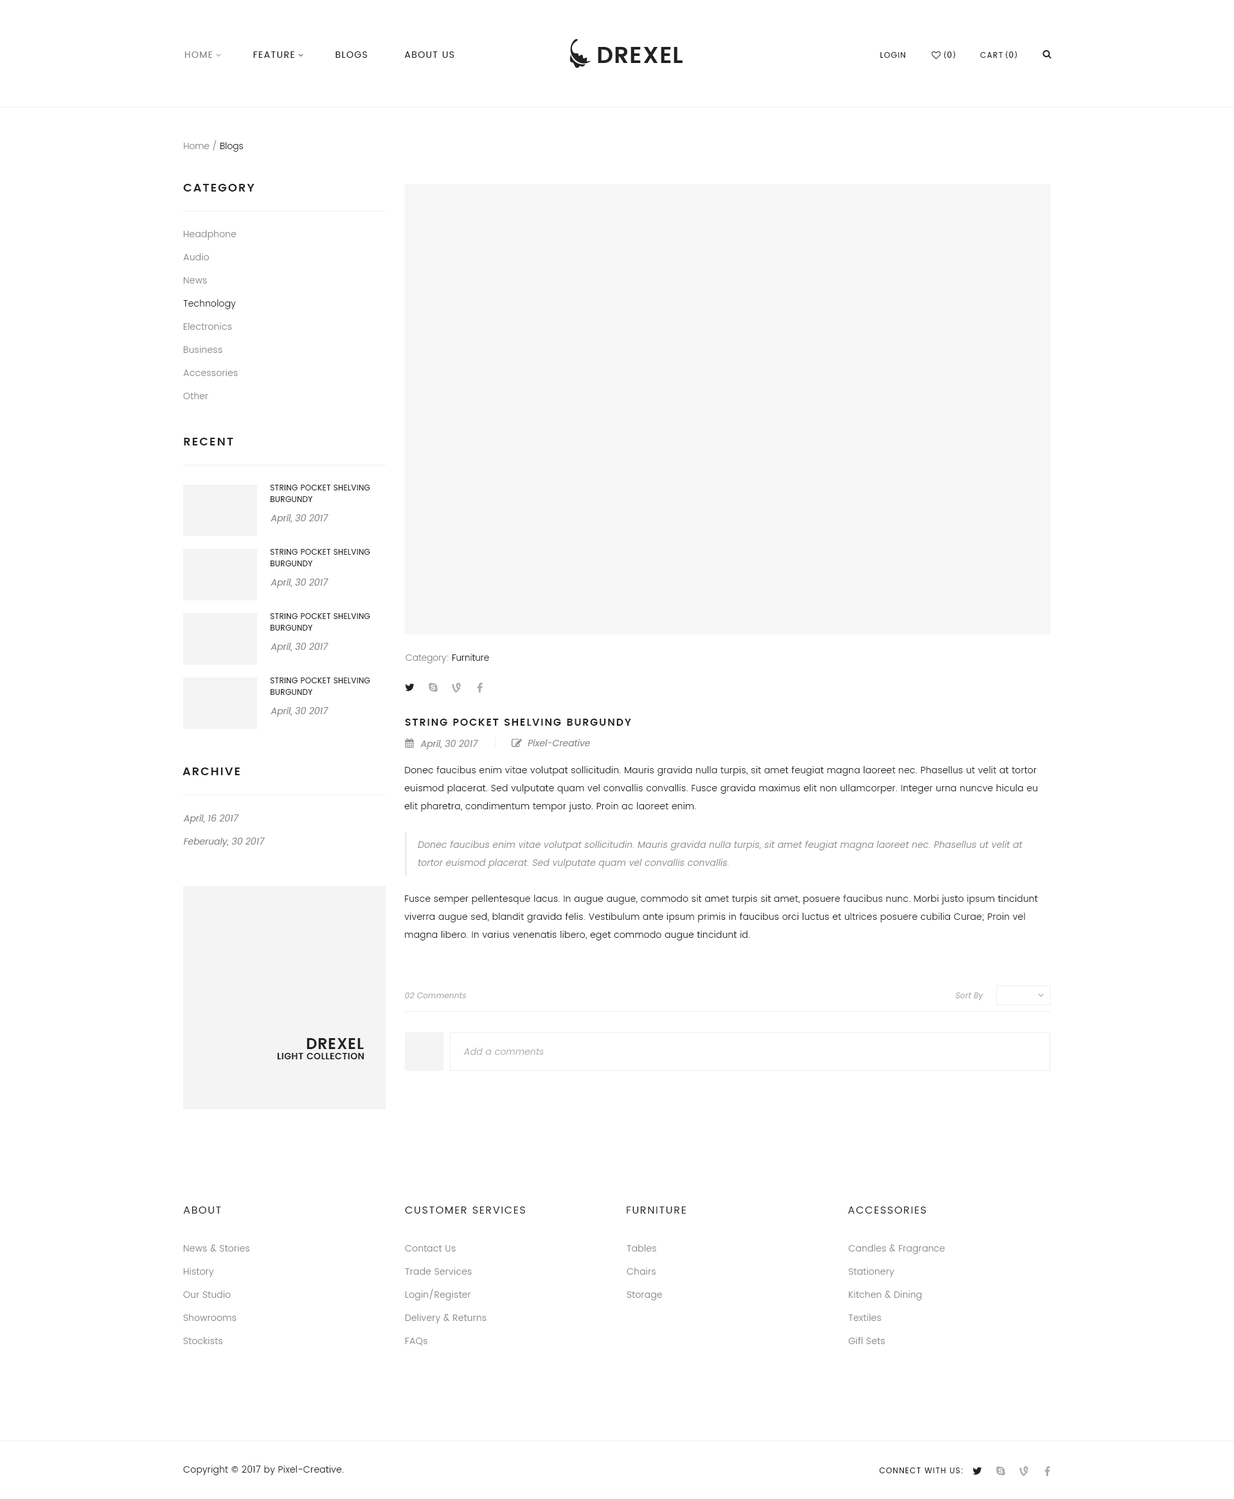
<style>
.page{position:relative;width:1234px;height:1499px;background:#ffffff}
.page>*{position:absolute;margin:0}
.t1{font:9px "Poppins-Regular";letter-spacing:0.1em;color:#222222;text-transform:uppercase}
.t2{font:9px "Poppins-Regular";letter-spacing:0.1em;color:#888888;text-transform:uppercase}
.t3{font:7.7px "Poppins-Regular";letter-spacing:0.1em;color:#222222;text-transform:uppercase}
.t4{font:9px "MyriadPro-Regular";letter-spacing:0.1em;color:#222222;text-transform:uppercase}
.t5{font:9px "Poppins-Light";color:#888888}
.t6{font:9px "Poppins-Light";color:#222222}
.t7{font:11.6px "Poppins-SemiBold";letter-spacing:0.1em;color:#222222;text-transform:uppercase}
.t8{font:9px/23.1px "Poppins-Light";letter-spacing:0.025em;color:#888888}
.t9{font:9px/23.1px "Poppins-Light";letter-spacing:0.025em;color:#222222}
.t10{font:7.7px/11.6px "Poppins-Regular";letter-spacing:0.025em;color:#222222;text-transform:uppercase}
.t11{font:9px "Poppins-Regular";color:#888888;font-style:italic}
.t12{font:10.3px "Poppins-SemiBold";letter-spacing:0.1em;color:#222222;text-transform:uppercase}
.t13{font:9px/18px "Poppins-Light";letter-spacing:0.025em;color:#222222}
.t14{font:9px/23.1px "Poppins-Regular";color:#888888;font-style:italic}
.t15{font:9px/18px "Poppins-Light";letter-spacing:0.025em;color:#888888;font-style:italic}
.t16{font:7.7px "Poppins-Regular";letter-spacing:0.025em;color:#aaaaaa;font-style:italic}
.t17{font:15.4px "Poppins-SemiBold";letter-spacing:0.025em;color:#222222;text-transform:uppercase}
.t18{font:9px "Poppins-Light";letter-spacing:0.025em;color:#aaaaaa;font-style:italic}
.t19{font:9px "Poppins-SemiBold";letter-spacing:0.025em;color:#222222;text-transform:uppercase}
.t20{font:10.3px "Poppins-Regular";letter-spacing:0.1em;color:#222222;text-transform:uppercase}
.t21{font:9px "Poppins-Light";letter-spacing:0.025em;color:#222222}
</style>
<div class="page">
<p class="t1" style="left:184px;top:51px;width:271px;height:7px"><span class="t2">Home</span>           Feature           Blogs          About Us</p>
<p class="t3" style="left:881px;top:52px;width:25px;height:6px">Login</p>
<p class="t4" style="left:944px;top:51px;width:11px;height:8px">(0)</p>
<p class="t3" style="left:980px;top:52px;width:23px;height:6px">Cart</p>
<p class="t4" style="left:1006px;top:51px;width:11px;height:8px">(0)</p>
<p class="t5" style="left:184px;top:140px;width:59px;height:12px">Home / <span class="t6">Blogs</span></p>
<p class="t7" style="left:183px;top:184px;width:72px;height:8px">CAtegory</p>
<p class="t8" style="left:183px;top:230px;width:55px;height:169px">Headphone<br>Audio<br>News<br><span class="t9">Technology<br></span>Electronics<br>Business<br>Accessories<br>Other</p>
<p class="t7" style="left:184px;top:438px;width:49px;height:8px">Recent</p>
<p class="t10" style="left:270px;top:485px;width:100px;height:17px">String Pocket Shelving Burgundy</p>
<p class="t11" style="left:271px;top:514px;width:57px;height:10px">April, 30 2017</p>
<p class="t10" style="left:270px;top:549px;width:100px;height:17px">String Pocket Shelving Burgundy</p>
<p class="t11" style="left:271px;top:579px;width:57px;height:9px">April, 30 2017</p>
<p class="t10" style="left:270px;top:613px;width:100px;height:18px">String Pocket Shelving Burgundy</p>
<p class="t11" style="left:271px;top:643px;width:57px;height:9px">April, 30 2017</p>
<p class="t5" style="left:406px;top:654px;width:83px;height:9px">Category: <span class="t6">Furniture</span></p>
<p class="t10" style="left:270px;top:678px;width:100px;height:17px">String Pocket Shelving Burgundy</p>
<p class="t11" style="left:271px;top:707px;width:57px;height:10px">April, 30 2017</p>
<p class="t12" style="left:405px;top:719px;width:226px;height:7px">String Pocket Shelving Burgundy</p>
<p class="t11" style="left:420px;top:740px;width:58px;height:10px">April, 30 2017</p>
<p class="t11" style="left:528px;top:739px;width:62px;height:7px">Pixel-Creative</p>
<p class="t7" style="left:183px;top:768px;width:57px;height:7px">ARCHIVE</p>
<p class="t13" style="left:404px;top:766px;width:634px;height:46px">Donec faucibus enim vitae volutpat sollicitudin. Mauris gravida nulla turpis, sit amet feugiat magna laoreet nec. Phasellus ut velit at tortor euismod placerat. Sed vulputate quam vel convallis convallis. Fusce gravida maximus elit non ullamcorper. Integer urna nuncve hicula eu elit pharetra, condimentum tempor justo. Proin ac laoreet enim.</p>
<p class="t14" style="left:183px;top:815px;width:82px;height:32px">April, 16 2017<br>Feberualy, 30 2017</p>
<p class="t15" style="left:418px;top:841px;width:605px;height:28px">Donec faucibus enim vitae volutpat sollicitudin. Mauris gravida nulla turpis, sit amet feugiat magna laoreet nec. Phasellus ut velit at tortor euismod placerat. Sed vulputate quam vel convallis convallis.</p>
<p class="t13" style="left:404px;top:895px;width:634px;height:46px">Fusce semper pellentesque lacus. In augue augue, commodo sit amet turpis sit amet, posuere faucibus nunc. Morbi justo ipsum tincidunt viverra augue sed, blandit gravida felis. Vestibulum ante ipsum primis in faucibus orci luctus et ultrices posuere cubilia Curae; Proin vel magna libero. In varius venenatis libero, eget commodo augue tincidunt id.</p>
<p class="t16" style="left:405px;top:993px;width:61px;height:5px">02 Commennts</p>
<p class="t16" style="left:956px;top:993px;width:28px;height:7px">Sort By</p>
<p class="t17" style="left:307px;top:1038px;width:57px;height:11px">Drexel</p>
<p class="t18" style="left:464px;top:1048px;width:80px;height:7px">Add a comments</p>
<p class="t19" style="left:277px;top:1053px;width:87px;height:6px">light collection</p>
<p class="t20" style="left:183px;top:1207px;width:38px;height:7px">About</p>
<p class="t20" style="left:405px;top:1207px;width:120px;height:7px">Customer services</p>
<p class="t20" style="left:627px;top:1207px;width:59px;height:7px">Furniture</p>
<p class="t20" style="left:848px;top:1207px;width:78px;height:7px">Accessories</p>
<p class="t8" style="left:183px;top:1245px;width:66px;height:99px">News &amp; Stories<br>History<br>Our Studio<br>Showrooms<br>Stockists</p>
<p class="t8" style="left:405px;top:1245px;width:82px;height:101px">Contact Us<br>Trade Services<br>Login/Register<br>Delivery &amp; Returns<br>FAQs</p>
<p class="t8" style="left:627px;top:1245px;width:35px;height:55px">Tables<br>Chairs<br>Storage</p>
<p class="t8" style="left:849px;top:1245px;width:96px;height:99px">Candles &amp; Fragrance<br>Stationery<br>Kitchen &amp; Dining<br>Textiles<br>Gifl Sets</p>
<p class="t21" style="left:183px;top:1466px;width:161px;height:9px">Copyright © 2017 by Pixel-Creative.</p>
<p class="t3" style="left:879px;top:1468px;width:84px;height:5px">Connect with us:</p>
</div>
